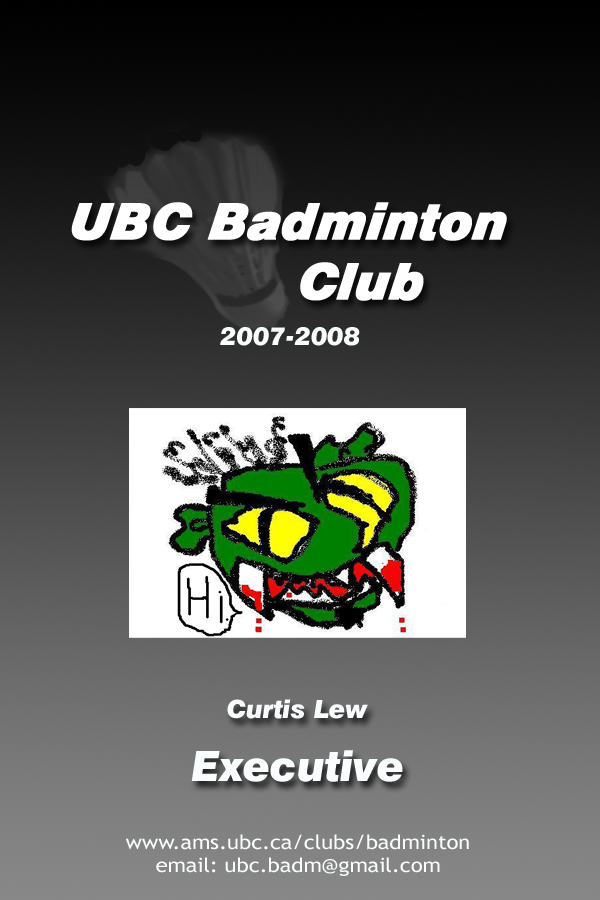
<style>
.page{position:relative;width:600px;height:900px}
.page>*{position:absolute;margin:0}
.t1{font:25px "Swiss721BT-BlackItalic";color:#f9fdfe}
.t2{font:41.7px "Swiss721BT-BlackItalic";color:#f9fdfe}
.t3{font:19.8px "TrebuchetMS";color:#f9fdfe;scale:1.1 1}
</style>
<div class="page">
<p class="t1" style="left:220px;top:327px;width:140px;height:19px">2007-2008</p>
<p class="t1" style="left:227px;top:699px;width:141px;height:20px">Curtis Lew</p>
<p class="t2" style="left:191px;top:750px;width:212px;height:32px">Executive</p>
<p class="t3" style="left:125px;top:834px;width:344px;height:42px;text-align:center">www.ams.ubc.ca/clubs/badminton<br>email: ubc.badm@gmail.com</p>
</div>
